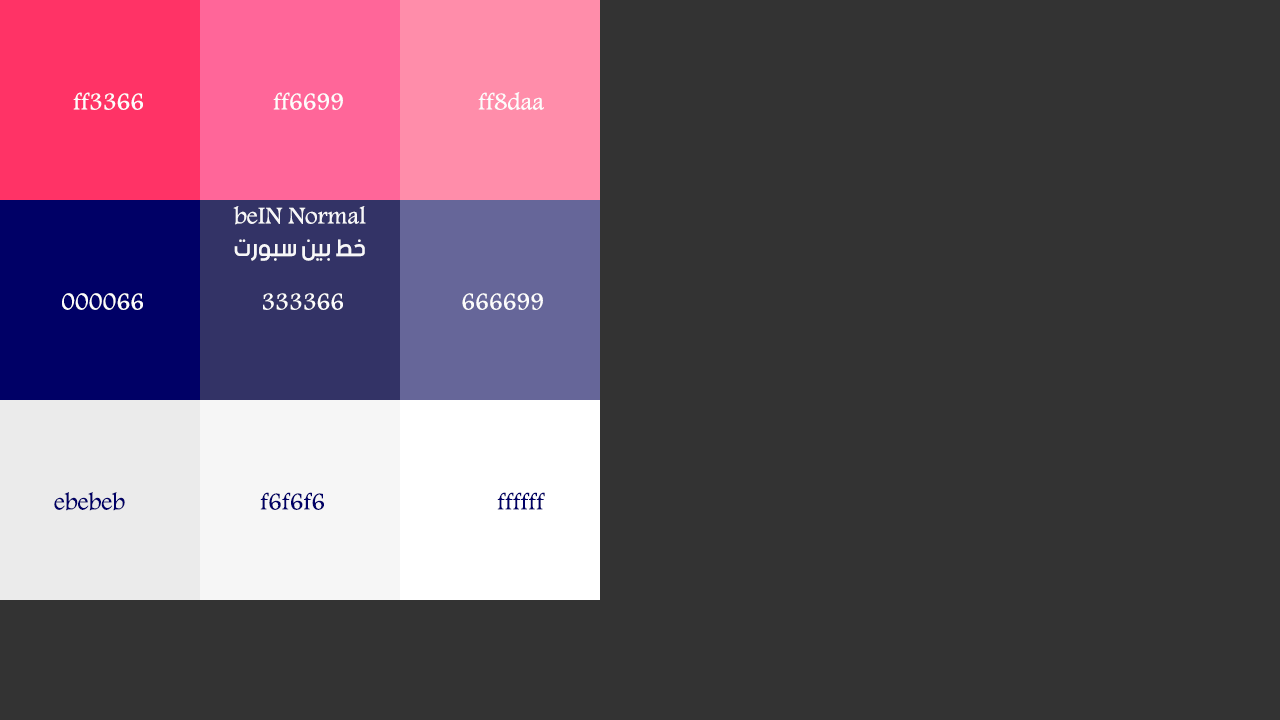
<style>
.page{position:relative;width:1280px;height:720px;background:#333333}
.page>*{position:absolute;margin:0}
.t1{font:25px "Andalus";color:#fcfcfc}
.t2{font:25px "Andalus";color:#f7f7f9}
.t3{font:25px "beINNormal";color:#f7f7f9}
.t4{font:25px "Andalus";color:#000066}
</style>
<div class="page">
<p class="t1" style="left:73px;top:92px;width:70px;height:18px">ff3366</p>
<p class="t1" style="left:273px;top:92px;width:70px;height:18px">ff6699</p>
<p class="t1" style="left:478px;top:92px;width:66px;height:18px">ff8daa</p>
<p class="t2" style="left:233px;top:206px;width:133px;height:19px">beIN Normal</p>
<p class="t3" style="left:234px;top:239px;width:131px;height:22px">خط بين سبورت</p>
<p class="t1" style="left:62px;top:293px;width:81px;height:17px">000066</p>
<p class="t1" style="left:263px;top:293px;width:80px;height:17px">333366</p>
<p class="t1" style="left:462px;top:293px;width:81px;height:17px">666699</p>
<p class="t4" style="left:54px;top:492px;width:71px;height:19px">ebebeb</p>
<p class="t4" style="left:260px;top:492px;width:64px;height:18px">f6f6f6</p>
<p class="t4" style="left:497px;top:492px;width:48px;height:18px">ffffff</p>
</div>
